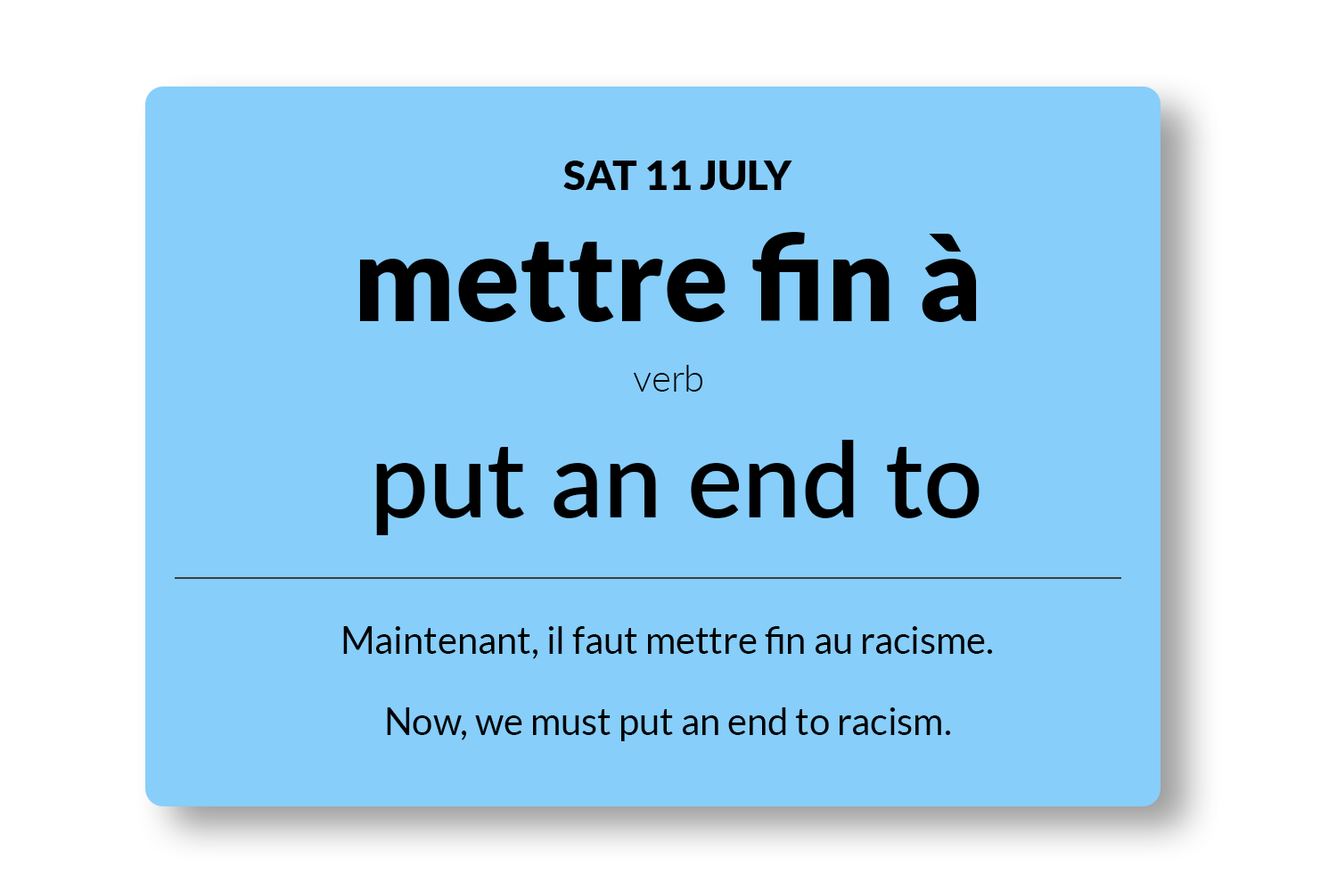
<style>
.page{position:relative;width:1337px;height:892px;background:#87cefa}
.page>*{position:absolute;margin:0}
.t1{font:40.9px "Lato-Black";color:#000000}
.t2{font:118.9px "Lato-Black";color:#000000}
.t3{font:37.2px "Lato-Light";color:#000000}
.t4{font:104px "Lato-Semibold";color:#000000}
.t5{font:37.2px "Lato-Regular";color:#000000}
</style>
<div class="page">
<p class="t1" style="left:563px;top:160px;width:230px;height:30px">SAT 11 JULY</p>
<p class="t2" style="left:359px;top:232px;width:618px;height:90px">mettre fin à</p>
<p class="t3" style="left:633px;top:365px;width:70px;height:26px">verb</p>
<p class="t4" style="left:376px;top:440px;width:604px;height:95px">put an end to</p>
<p class="t5" style="left:343px;top:626px;width:650px;height:33px">Maintenant, il faut mettre fin au racisme.</p>
<p class="t5" style="left:387px;top:707px;width:564px;height:34px">Now, we must put an end to racism.</p>
</div>
